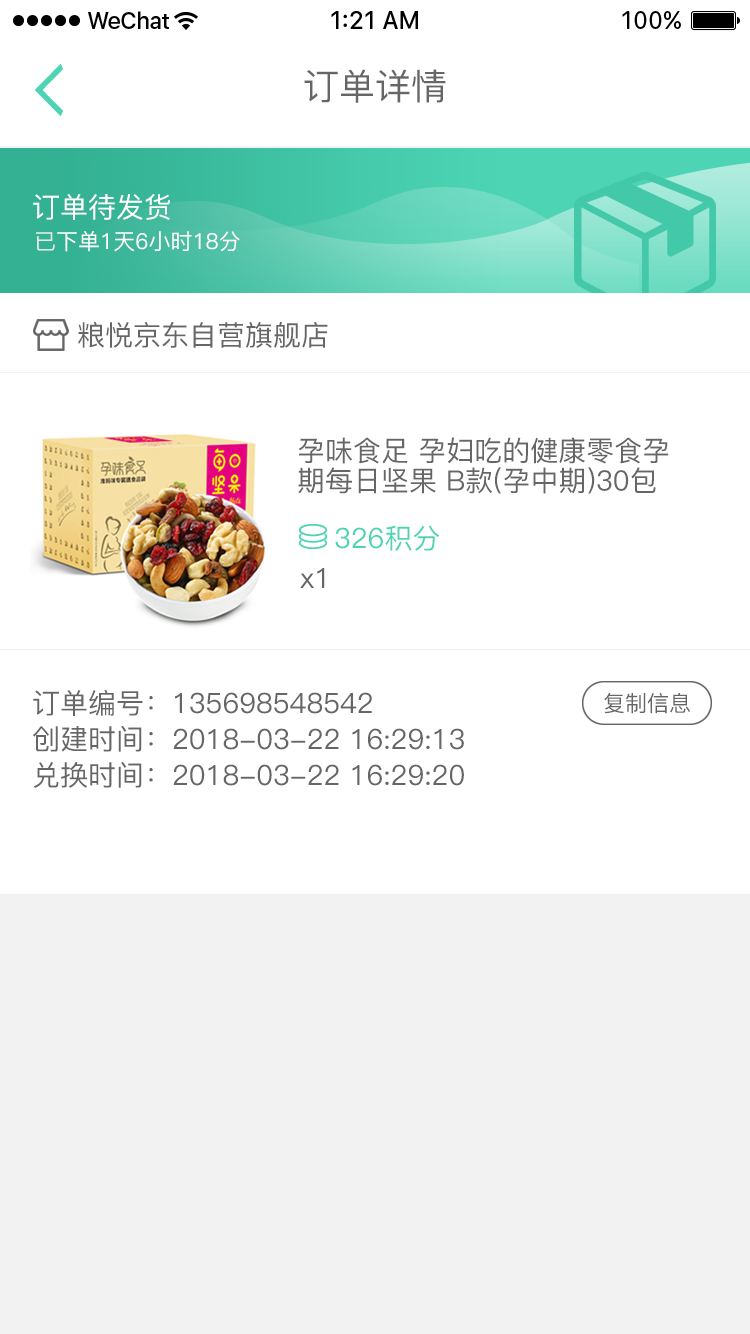
<style>
.page{position:relative;width:750px;height:1334px;background:#ffffff}
.page>*{position:absolute;margin:0}
.t1{font:36px "PingFang-SC-Medium";color:#666666}
.t2{font:28px "PingFang-SC-Medium";color:#ffffff}
.t3{font:22px "PingFang-SC-Medium";color:#ffffff}
.t4{font:22px "PingFang-SC-Medium";color:#e8e8e8}
.t5{font:28px "PingFang-SC-Medium";color:#666666}
.t6{font:28px/30px "PingFang-SC-Medium";color:#666666}
.t7{font:28px "PingFang-SC-Medium";color:#4cd4b4}
.t8{font:28px/36px "PingFang-SC-Medium";color:#666666}
.t9{font:22px "PingFang-SC-Medium";color:#666666}
</style>
<div class="page">
<p class="t1" style="left:304px;top:69px;width:142px;height:34px">订单详情</p>
<p class="t2" style="left:33px;top:194px;width:137px;height:26px">订单待发货</p>
<p class="t3" style="left:36px;top:231px;width:204px;height:21px"><span class="t4">已</span>下单1天6小时18分</p>
<p class="t5" style="left:78px;top:322px;width:250px;height:26px">粮悦京东自营旗舰店</p>
<p class="t6" style="left:298px;top:437px;width:371px;height:57px">孕味食足 孕妇吃的健康零食孕期每日坚果 B款(孕中期)30包</p>
<p class="t7" style="left:335px;top:525px;width:104px;height:26px">326积分</p>
<p class="t5" style="left:300px;top:568px;width:25px;height:20px">x1</p>
<p class="t8" style="left:33px;top:690px;width:431px;height:98px">订单编号：135698548542<br>创建时间：2018-03-22 16:29:13<br>兑换时间：2018-03-22 16:29:20</p>
<p class="t9" style="left:604px;top:692px;width:86px;height:22px">复制信息</p>
</div>
